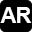
<style>
.page{position:relative;width:32px;height:32px;background:#000000}
.page>*{position:absolute;margin:0}
.t1{font:22px "Arial-BoldMT";letter-spacing:-0.04em;color:#fefefe}
</style>
<div class="page">
<p class="t1" style="left:0px;top:7px;width:32px;height:16px">AR</p>
</div>
